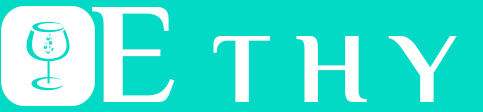
<style>
.page{position:relative;width:483px;height:112px;background:#03dac5}
.page>*{position:absolute;margin:0}
.t1{font:143.1px "Philosopher-Bold";letter-spacing:0.24em;color:#ffffff;font-variant:small-caps}
</style>
<div class="page">
<p class="t1" style="left:92px;top:7px;width:365px;height:95px">Ethy</p>
</div>
